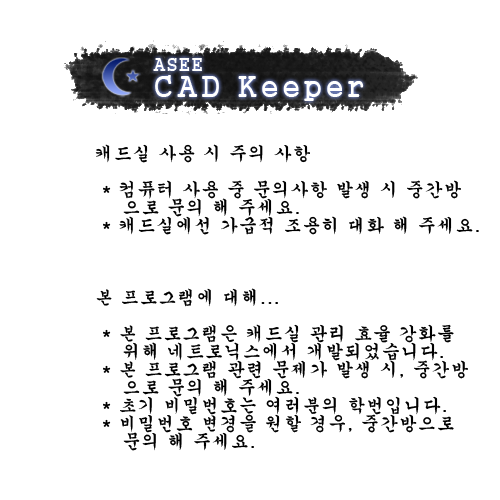
<style>
.page{position:relative;width:500px;height:500px;background:#ffffff}
.page>*{position:absolute;margin:0}
.t1{font:18px "Gungsuh";letter-spacing:0.05em;color:#ffffff}
.t2{font:30px "Gungsuh";letter-spacing:0.1em;color:#ffffff}
.t3{font:18px/18px "Gungsuh";letter-spacing:0.05em;color:#000000}
</style>
<div class="page">
<p class="t1" style="left:153px;top:58px;width:49px;height:13px">ASEE</p>
<p class="t2" style="left:155px;top:75px;width:209px;height:26px">CAD Keeper</p>
<p class="t3" style="left:95px;top:144px;width:384px;height:307px">캐드실 사용 시 주의 사항<br><br> * 컴퓨터 사용 중 문의사항 발생 시 중간방<br>    으로 문의 해 주세요.<br> * 캐드실에선 가급적 조용히 대화 해 주세요.<br><br><br><br>본 프로그램에 대해...<br><br> * 본 프로그램은 캐드실 관리 효율 강화를<br>    위해 네트로닉스에서 개발되었습니다.<br> * 본 프로그램 관련 문제가 발생 시, 중간방<br>    으로 문의 해 주세요.<br> * 초기 비밀번호는 여러분의 학번입니다.<br> * 비밀번호 변경을 원할 경우, 중간방으로<br>    문의 해 주세요.</p>
</div>
